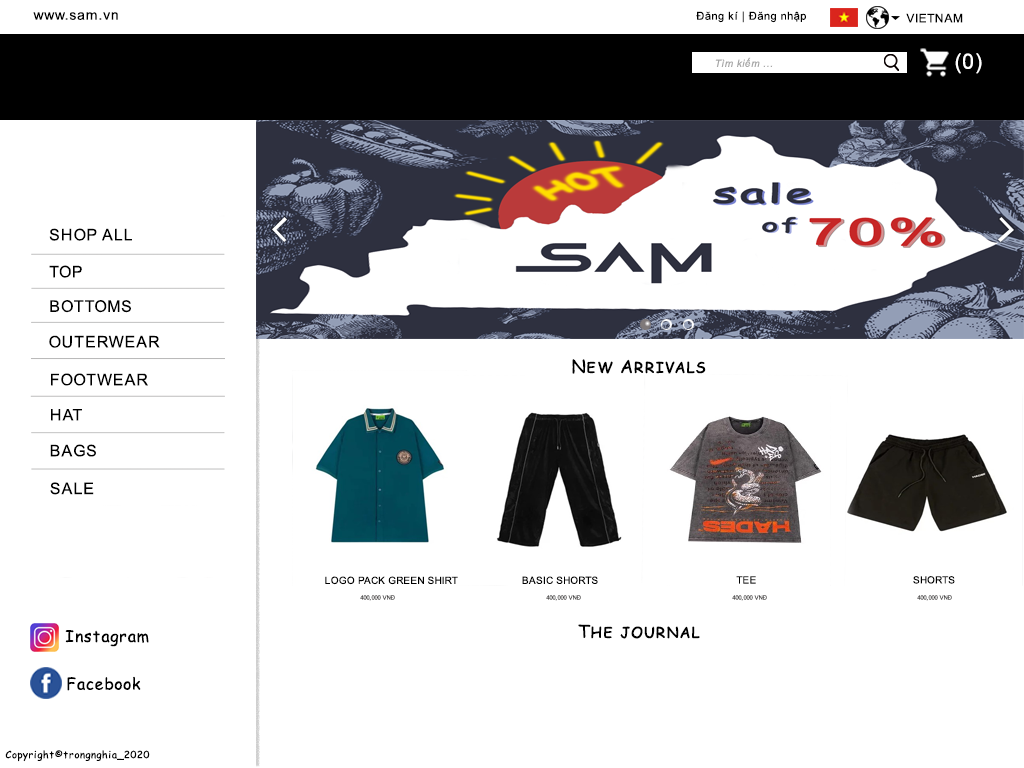
<style>
.page{position:relative;width:1024px;height:768px;background:#ffffff}
.page>*{position:absolute;margin:0}
.t1{font:14px "ArialMT";letter-spacing:0.05em;color:#000000}
.t2{font:11px "ArialMT";letter-spacing:0.05em;color:#000000}
.t3{font:12px "ArialMT";letter-spacing:0.05em;color:#000000}
.t4{font:21px "ArialMT";letter-spacing:0.05em;color:#ffffff}
.t5{font:10px "Arial-ItalicMT";letter-spacing:0.05em;color:#a7a7a7}
.t6{font:16px "ArialMT";letter-spacing:0.05em;color:#000000}
.t7{font:18px "ComicSansMS";letter-spacing:0.05em;color:#000000;font-variant:small-caps}
.t8{font:10px "ArialMT";letter-spacing:0.005em;color:#000000;font-variant:small-caps}
.t9{font:6px "ArialMT";letter-spacing:0.005em;color:#4d4b4b;font-variant:small-caps}
.t10{font:16px "ComicSansMS";letter-spacing:0.05em;color:#000000}
.t11{font:10px "ComicSansMS";letter-spacing:0.05em;color:#000000}
</style>
<div class="page">
<p class="t1" style="left:33px;top:12px;width:85px;height:8px">www.sam.vn</p>
<p class="t2" style="left:696px;top:11px;width:110px;height:12px">Đăng kí | Đăng nhập</p>
<p class="t3" style="left:906px;top:13px;width:57px;height:10px">VIETNAM</p>
<p class="t4" style="left:955px;top:53px;width:27px;height:21px">(0)</p>
<p class="t5" style="left:715px;top:57px;width:58px;height:10px">Tìm kiếm ...</p>
<p class="t6" style="left:49px;top:228px;width:83px;height:13px">SHOP ALL</p>
<p class="t6" style="left:49px;top:265px;width:33px;height:13px">TOP</p>
<p class="t6" style="left:50px;top:300px;width:81px;height:13px">BOTTOMS</p>
<p class="t6" style="left:49px;top:335px;width:111px;height:13px">OUTERWEAR</p>
<p class="t7" style="left:572px;top:359px;width:134px;height:15px">New Arrivals</p>
<p class="t6" style="left:51px;top:373px;width:97px;height:13px">FOOTWEAR</p>
<p class="t6" style="left:51px;top:409px;width:31px;height:12px">HAT</p>
<p class="t6" style="left:50px;top:444px;width:46px;height:13px">BAGS</p>
<p class="t6" style="left:50px;top:482px;width:44px;height:13px">SALE</p>
<p class="t8" style="left:325px;top:576px;width:133px;height:9px">LOGO PACK GREEN SHIRT</p>
<p class="t8" style="left:522px;top:576px;width:76px;height:8px">BASIC SHORTS</p>
<p class="t8" style="left:736px;top:576px;width:20px;height:8px">TEE</p>
<p class="t8" style="left:913px;top:576px;width:42px;height:8px">SHORTS</p>
<p class="t9" style="left:360px;top:595px;width:35px;height:6px">400,000 VNĐ</p>
<p class="t9" style="left:546px;top:595px;width:35px;height:6px">400,000 VNĐ</p>
<p class="t9" style="left:732px;top:595px;width:35px;height:6px">400,000 VNĐ</p>
<p class="t9" style="left:917px;top:595px;width:35px;height:6px">400,000 VNĐ</p>
<p class="t10" style="left:65px;top:630px;width:84px;height:17px">Instagram</p>
<p class="t7" style="left:578px;top:624px;width:122px;height:15px">The journal</p>
<p class="t10" style="left:67px;top:676px;width:74px;height:15px">Facebook</p>
<p class="t11" style="left:5px;top:750px;width:145px;height:12px">Copyright©trongnghia_2020</p>
</div>
